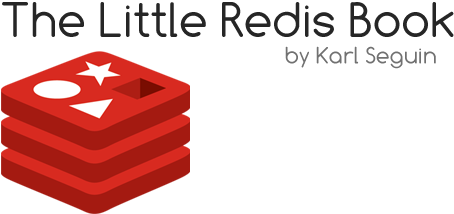
<style>
.page{position:relative;width:454px;height:214px;background:#ffffff}
.page>*{position:absolute;margin:0}
.t1{font:50px "Comfortaa";color:#262626}
.t2{font:24px "Comfortaa";color:#717171}
</style>
<div class="page">
<p class="t1" style="left:2px;top:2px;width:452px;height:35px">The Little Redis Book</p>
<p class="t2" style="left:285px;top:46px;width:151px;height:23px">by Karl Seguin</p>
</div>
